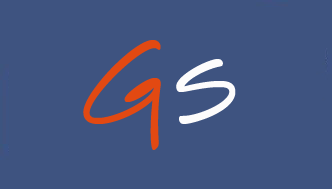
<style>
.page{position:relative;width:332px;height:189px;background:#3e5380}
.page>*{position:absolute;margin:0}
.t1{font:125px "SketchFlowPrint";color:#e24912}
.t2{font:125px "SketchFlowPrint";color:#fdfcfc}
</style>
<div class="page">
<p class="t1" style="left:83px;top:40px;width:153px;height:110px">G<span class="t2">s</span></p>
</div>
